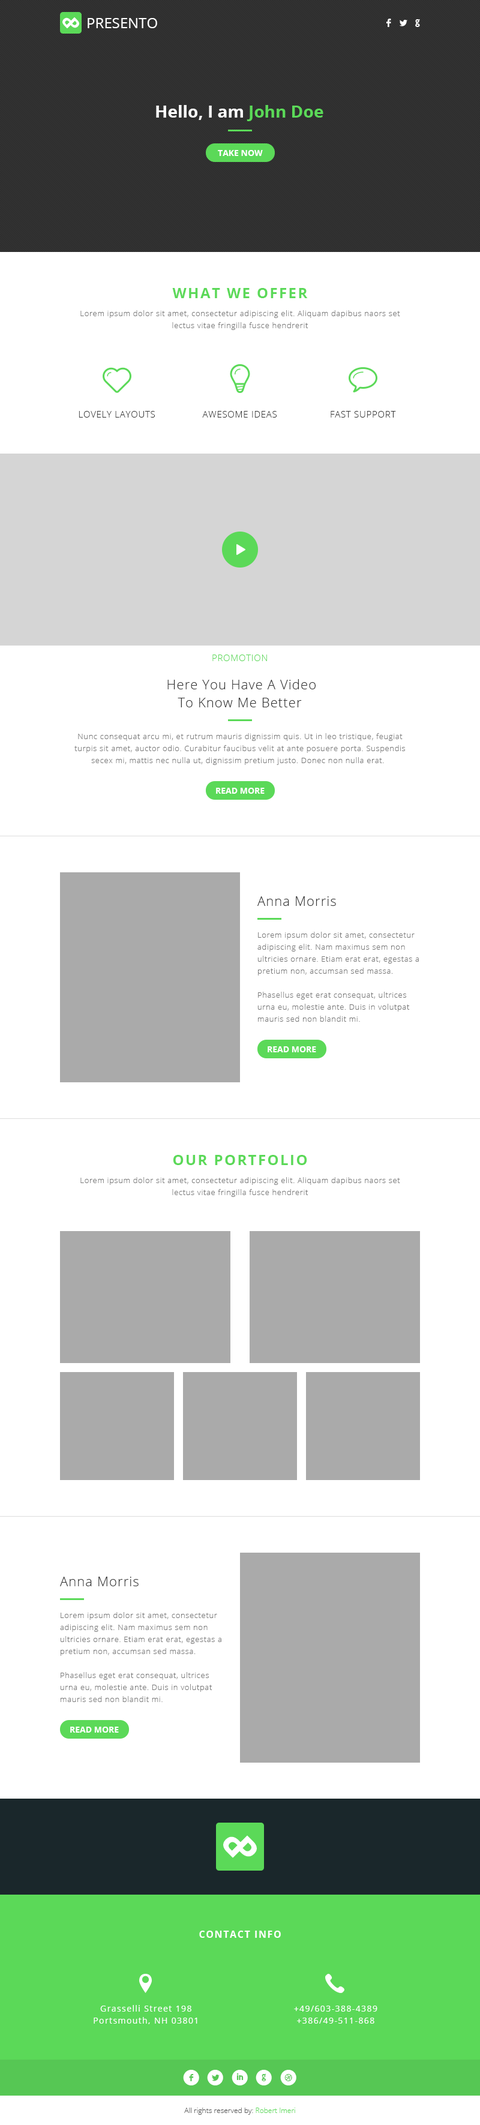
<style>
.page{position:relative;width:480px;height:2125px;background:#ffffff}
.page>*{position:absolute;margin:0}
.t1{font:18px "OpenSans-Bold";color:#ffffff}
.t2{font:14.4px "OpenSans";color:#ffffff}
.t3{font:13.2px "Socialico";letter-spacing:0.5em;color:#ffffff}
.t4{font:16.8px "OpenSans-Bold";color:#ffffff}
.t5{font:16.8px "OpenSans-Bold";color:#5bd958}
.t6{font:8.4px "OpenSans-Bold";color:#ffffff}
.t7{font:14.4px "OpenSans-Bold";letter-spacing:0.1em;color:#5bd958}
.t8{font:7.8px/12px "OpenSans-Light";letter-spacing:0.05em;color:#777777}
.t9{font:9px "OpenSans-Light";letter-spacing:0.05em;color:#333333}
.t10{font:9px "OpenSans-Light";letter-spacing:0.05em;color:#5bd958}
.t11{font:13.2px/18px "OpenSans-Light";letter-spacing:0.05em;color:#333333}
.t12{font:7.8px/12px "OpenSans-Light";letter-spacing:0.05em;color:#ffffff}
.t13{font:13.2px "OpenSans-Light";letter-spacing:0.05em;color:#333333}
.t14{font:36px "OpenSans-Bold";color:#ffffff}
.t15{font:9.6px "OpenSans-Bold";letter-spacing:0.1em;color:#ffffff}
.t16{font:8.4px/12px "OpenSans";letter-spacing:0.1em;color:#ffffff}
.t17{font:22.2px "Socialico";letter-spacing:0.3em;color:#ffffff}
.t18{font:7.2px "OpenSans-Light";color:#555555}
.t19{font:7.2px "OpenSans-Light";color:#5bd958}
</style>
<div class="page">
<p class="t1" style="left:62px;top:17px;width:14px;height:12px;rotate:-135deg">P</p>
<p class="t1" style="left:65px;top:17px;width:14px;height:11px;rotate:45deg">P</p>
<p class="t2" style="left:88px;top:18px;width:69px;height:10px">PRESENTO</p>
<p class="t3" style="left:386px;top:19px;width:34px;height:8px">FLG</p>
<p class="t4" style="left:156px;top:105px;width:167px;height:16px">Hello, I am<span class="t5"> John Doe</span></p>
<p class="t6" style="left:218px;top:150px;width:45px;height:6px">TAKE NOW</p>
<p class="t7" style="left:172px;top:288px;width:136px;height:10px">WHAT WE OFFER</p>
<p class="t8" style="left:80px;top:310px;width:320px;height:20px;text-align:center">Lorem ipsum dolor sit amet, consectetur adipiscing elit. Aliquam dapibus naors set lectus vitae fringilla fusce hendrerit</p>
<p class="t9" style="left:79px;top:411px;width:76px;height:7px">LOVELY LAYOUTS</p>
<p class="t9" style="left:202px;top:411px;width:75px;height:7px">AWESOME IDEAS</p>
<p class="t9" style="left:331px;top:411px;width:65px;height:7px">FAST SUPPORT</p>
<p class="t10" style="left:212px;top:655px;width:55px;height:6px">PROMOTION</p>
<p class="t11" style="left:167px;top:679px;width:149px;height:28px;text-align:center">Here You Have A Video <br>To Know Me Better</p>
<p class="t8" style="left:74px;top:733px;width:331px;height:32px;text-align:center">Nunc consequat arcu mi, et rutrum mauris dignissim quis. Ut in leo tristique, feugiat turpis sit amet, auctor odio. Curabitur faucibus velit at ante posuere porta. Suspendis secex mi, mattis nec nulla ut, dignissim pretium justo. Donec non nulla erat.<span class="t12">a</span></p>
<p class="t6" style="left:216px;top:788px;width:49px;height:6px">READ MORE</p>
<p class="t13" style="left:257px;top:896px;width:79px;height:10px">Anna Morris</p>
<p class="t8" style="left:257px;top:932px;width:162px;height:90px;text-align:right">Lorem ipsum dolor sit amet, consectetur adipiscing elit. Nam maximus sem non ultricies ornare. Etiam erat erat, egestas a pretium non, accumsan sed massa.<span class="t12">a</span> <br><br>Phasellus eget erat consequat, ultrices urna eu, molestie ante. Duis in volutpat mauris sed non blandit mi.<span class="t12">a</span></p>
<p class="t6" style="left:268px;top:1046px;width:48px;height:6px">READ MORE</p>
<p class="t7" style="left:173px;top:1155px;width:134px;height:10px">OUR PORTFOLIO</p>
<p class="t8" style="left:80px;top:1177px;width:320px;height:20px;text-align:center">Lorem ipsum dolor sit amet, consectetur adipiscing elit. Aliquam dapibus naors set lectus vitae fringilla fusce hendrerit</p>
<p class="t13" style="left:60px;top:1577px;width:79px;height:9px">Anna Morris</p>
<p class="t8" style="left:60px;top:1612px;width:161px;height:90px;text-align:right">Lorem ipsum dolor sit amet, consectetur adipiscing elit. Nam maximus sem non ultricies ornare. Etiam erat erat, egestas a pretium non, accumsan sed massa.<span class="t12">a</span> <br><br>Phasellus eget erat consequat, ultrices urna eu, molestie ante. Duis in volutpat mauris sed non blandit mi.<span class="t12">a</span></p>
<p class="t6" style="left:70px;top:1727px;width:49px;height:6px">READ MORE</p>
<p class="t14" style="left:223px;top:1835px;width:28px;height:23px;rotate:-135deg">P</p>
<p class="t14" style="left:229px;top:1835px;width:28px;height:23px;rotate:45deg">P</p>
<p class="t15" style="left:199px;top:1931px;width:82px;height:7px">CONTACT INFO</p>
<p class="t16" style="left:94px;top:2005px;width:103px;height:19px;text-align:center">198 Grasselli Street<br>Portsmouth, NH 03801</p>
<p class="t16" style="left:294px;top:2006px;width:83px;height:18px;text-align:center">+49/603-388-4389<br>+386/49-511-868</p>
<p class="t17" style="left:183px;top:2070px;width:113px;height:16px">fligd</p>
<p class="t18" style="left:184px;top:2108px;width:111px;height:7px">All rights reserved by: <span class="t19">Robert Imeri</span></p>
</div>
